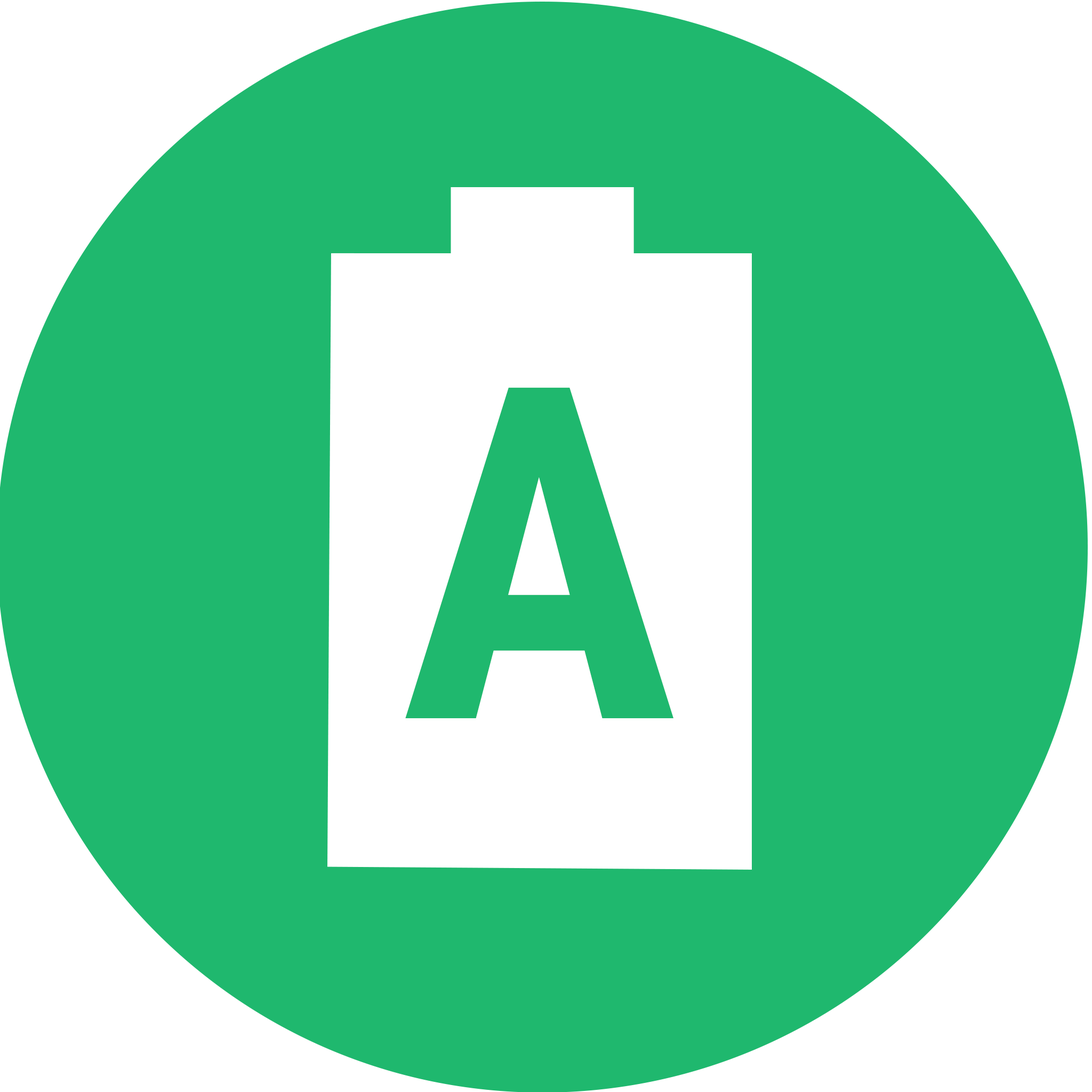
<style>
.page{position:relative;width:1092px;height:1092px;background:#1fb86e}
.page>*{position:absolute;margin:0}
.t1{font:464.9px "RobotoCondensed-Bold";color:#1fb86e}
</style>
<div class="page">
<p class="t1" style="left:405px;top:388px;width:269px;height:330px">A</p>
</div>
